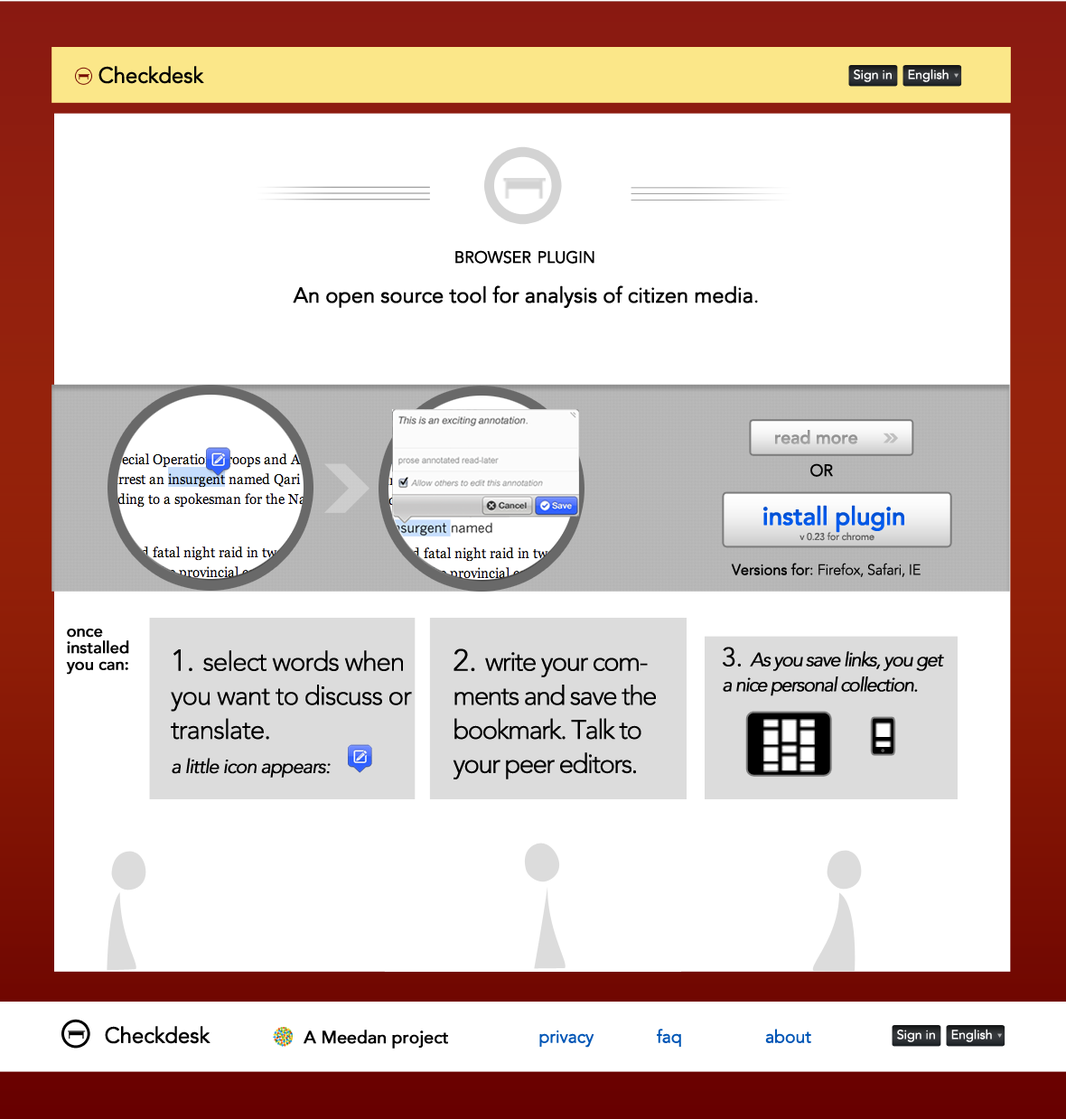
<style>
.page{position:relative;width:1066px;height:1119px;background:#ffffff}
.page>*{position:absolute;margin:0}
.t1{font:21.4px "AvenirLTStd-Light";letter-spacing:-0.02em;color:#000000;font-weight:bold}
.t2{font:12.2px "AvenirLTStd-Light";letter-spacing:-0.02em;color:#ffffff;font-weight:bold;scale:1.04 1}
.t3{font:22.9px "AvenirLTStd-Light";letter-spacing:-0.02em;color:#000000;font-variant:small-caps;font-weight:bold}
.t4{font:21.1px "AvenirLTStd-Light";letter-spacing:-0.02em;color:#000000;font-weight:bold}
.t5{font:17.5px "AvenirLTStd-Medium";letter-spacing:-0.02em;color:#9a9a9a;font-weight:bold}
.t6{font:24.7px "AvenirLTStd-Medium";letter-spacing:-0.02em;color:#0158e7;font-weight:bold}
.t7{font:9.6px "AvenirLTStd-Light";letter-spacing:-0.02em;color:#606060;font-weight:bold}
.t8{font:14.7px "AvenirLTStd-Light";letter-spacing:-0.02em;color:#000000}
.t9{font:14.7px "AvenirLTStd-Light";letter-spacing:-0.02em;color:#000000;font-weight:bold}
.t10{font:16.4px/16.6px "AvenirLTStd-Medium";letter-spacing:-0.02em;color:#000000;font-weight:bold}
.t11{font:26.5px/34px "AvenirLTStd-Light";letter-spacing:-0.06em;color:#000000;font-weight:bold}
.t12{font:30.1px/34px "AvenirLTStd-Light";letter-spacing:-0.02em;color:#000000;font-weight:bold}
.t13{font:19.3px/34px "AvenirLTStd-LightOblique";letter-spacing:-0.06em;color:#000000;font-weight:bold}
.t14{font:26.5px/34px "AvenirLTStd-Light";letter-spacing:-0.08em;color:#000000;font-weight:bold}
.t15{font:19.3px/25px "AvenirLTStd-LightOblique";letter-spacing:-0.08em;color:#000000;font-weight:bold}
.t16{font:26.5px/34px "AvenirLTStd-Light";letter-spacing:-0.02em;color:#000000;font-weight:bold}
.t17{font:17.5px "AvenirLTStd-Medium";letter-spacing:-0.02em;color:#000000;font-weight:bold}
.t18{font:17.3px "AvenirLTStd-Light";letter-spacing:-0.02em;color:#0056b6;font-weight:bold}
</style>
<div class="page">
<p class="t1" style="left:98px;top:66px;width:106px;height:18px">Checkdesk</p>
<p class="t2" style="left:853px;top:70px;width:38px;height:12px">Sign in</p>
<p class="t2" style="left:908px;top:69px;width:40px;height:13px">English</p>
<p class="t3" style="left:455px;top:250px;width:139px;height:14px">browser plugin</p>
<p class="t4" style="left:293px;top:285px;width:465px;height:23px">An open source tool for analysis of citizen media.</p>
<p class="t5" style="left:775px;top:430px;width:83px;height:14px">read more</p>
<p class="t3" style="left:810px;top:463px;width:23px;height:14px">or</p>
<p class="t6" style="left:763px;top:505px;width:141px;height:28px">install plugin</p>
<p class="t7" style="left:799px;top:532px;width:75px;height:9px">v 0.23 for chrome</p>
<p class="t8" style="left:731px;top:563px;width:189px;height:14px"><span class="t9">Versions for: </span>Firefox, Safari, IE</p>
<p class="t10" style="left:66px;top:629px;width:63px;height:46px">once <br>installed<br>you can:</p>
<p class="t11" style="left:171px;top:649px;width:241px;height:129px"><span class="t12">1. </span>select words when you want to discuss or translate.<br><span class="t13">a little icon appears:</span></p>
<p class="t14" style="left:452px;top:648px;width:204px;height:131px"><span class="t12">2. </span>write your comments and save the bookmark. Talk to your peer editors.</p>
<p class="t15" style="left:722px;top:647px;width:222px;height:49px"><span class="t16">3. </span>As you save links, you get a nice personal collection.</p>
<p class="t1" style="left:105px;top:1026px;width:105px;height:18px">Checkdesk</p>
<p class="t17" style="left:303px;top:1030px;width:145px;height:19px">A Meedan project</p>
<p class="t18" style="left:539px;top:1029px;width:272px;height:19px">privacy      faq         about</p>
<p class="t2" style="left:897px;top:1030px;width:38px;height:12px">Sign in</p>
<p class="t2" style="left:951px;top:1029px;width:41px;height:13px">English</p>
</div>
